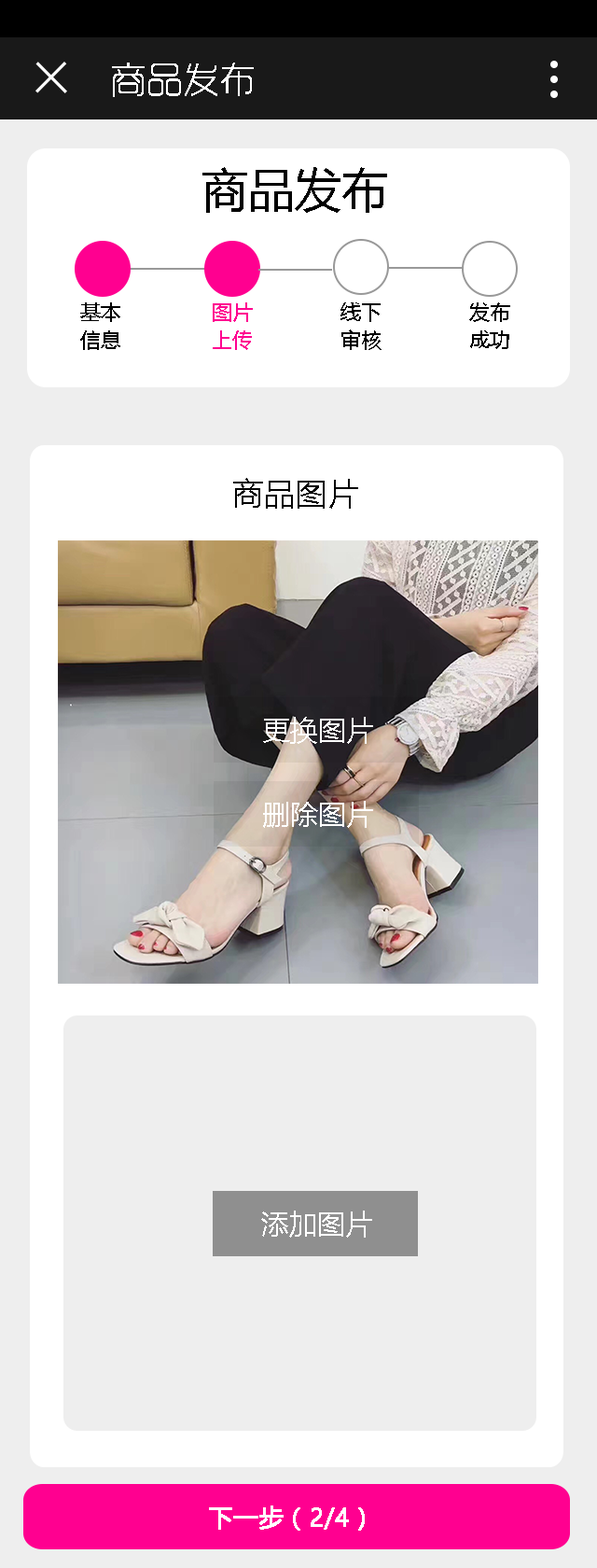
<style>
.page{position:relative;width:597px;height:1568px;background:#eeeeee}
.page>*{position:absolute;margin:0}
.t1{font:35.5px "RTWSYueGoG0v1-ExLight";color:#ffffff;font-weight:bold}
.t2{font:46.7px "MicrosoftYaHei";color:#000000}
.t3{font:20.5px/28px "MicrosoftYaHei";color:#000000}
.t4{font:20.5px/28px "MicrosoftYaHei";color:#ff0090}
.t5{font:31.7px "MicrosoftYaHei";color:#000000}
.t6{font:28px "MicrosoftYaHei";color:#ffffff}
.t7{font:24.3px "MicrosoftYaHei";color:#ffffff;font-weight:bold}
</style>
<div class="page">
<p class="t1" style="left:112px;top:63px;width:142px;height:34px">商品发布</p>
<p class="t2" style="left:203px;top:167px;width:184px;height:46px">商品发布</p>
<p class="t3" style="left:80px;top:302px;width:40px;height:48px">基本<br>信息</p>
<p class="t4" style="left:213px;top:302px;width:40px;height:48px">图片<br>上传</p>
<p class="t3" style="left:341px;top:302px;width:41px;height:48px">线下<br>审核</p>
<p class="t3" style="left:469px;top:302px;width:42px;height:47px">发布<br>成功</p>
<p class="t5" style="left:233px;top:478px;width:125px;height:31px">商品图片</p>
<p class="t6" style="left:263px;top:717px;width:110px;height:27px">更换图片</p>
<p class="t6" style="left:263px;top:801px;width:110px;height:27px">删除图片</p>
<p class="t6" style="left:261px;top:1211px;width:111px;height:27px">添加图片</p>
<p class="t7" style="left:209px;top:1505px;width:156px;height:26px">下一步（2/4）</p>
</div>
